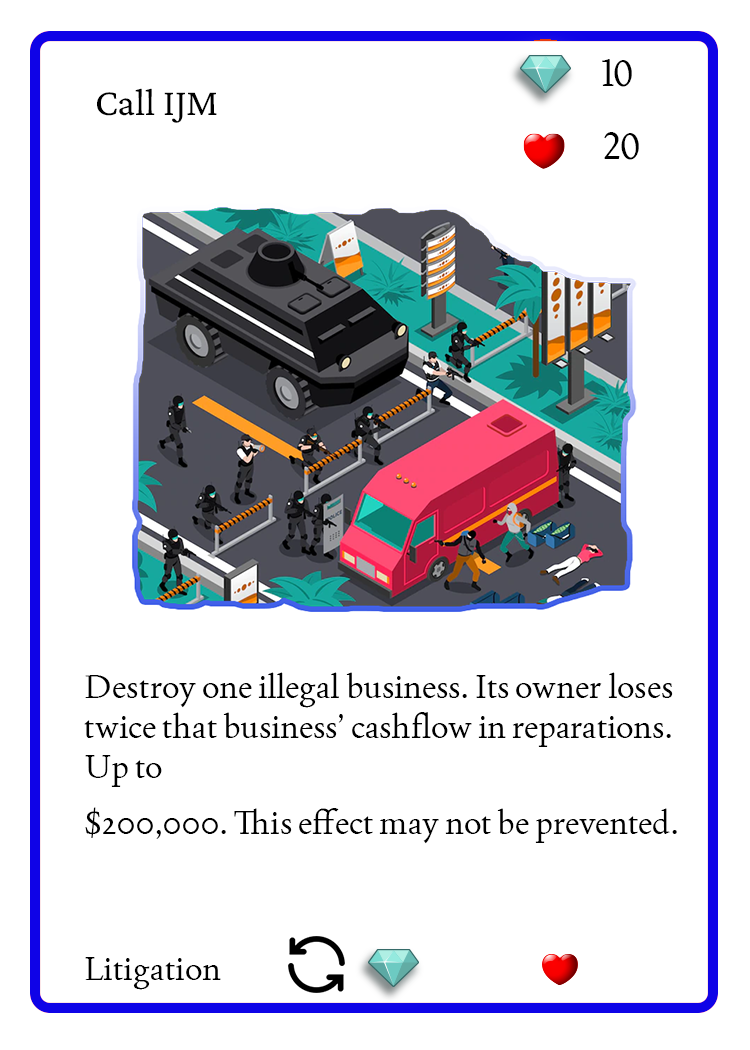
<style>
.page{position:relative;width:750px;height:1050px;background:#ffffff}
.page>*{position:absolute;margin:0}
.t1{font:37.5px "Joan-Regular";color:#000000;text-transform:uppercase}
.t2{font:38.9px "CrimsonPro-Regular";color:#000000}
.t3{font:33.3px "Joan-Regular";color:#000000}
</style>
<div class="page">
<p class="t1" style="left:602px;top:59px;width:30px;height:28px">10</p>
<p class="t2" style="left:97px;top:88px;width:120px;height:35px">Call IJM</p>
<p class="t1" style="left:604px;top:132px;width:35px;height:28px">20</p>
<p class="t3" style="left:84px;top:672px;width:593px;height:172px">Destroy one illegal business. Its owner loses twice that business’ cashflow in reparations. Up to<br>$200,000. This effect may not be prevented.</p>
<p class="t3" style="left:85px;top:957px;width:136px;height:33px">Litigation</p>
</div>
